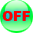
<style>
.page{position:relative;width:33px;height:33px}
.page>*{position:absolute;margin:0}
.t1{font:13px "Arial-Black";color:#ff0000}
</style>
<div class="page">
<p class="t1" style="left:2px;top:11px;width:28px;height:10px">OFF</p>
</div>
